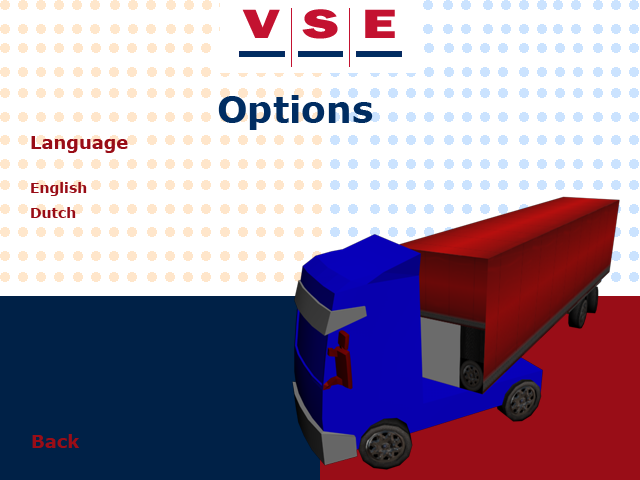
<style>
.page{position:relative;width:640px;height:480px;background:#ffffff}
.page>*{position:absolute;margin:0}
.t1{font:36px "Verdana-Bold";color:#002d62}
.t2{font:18px "Verdana-Bold";color:#990e17}
.t3{font:14px "Verdana-Bold";color:#990e17}
</style>
<div class="page">
<p class="t1" style="left:218px;top:95px;width:155px;height:35px">Options</p>
<p class="t2" style="left:31px;top:136px;width:97px;height:17px">Language</p>
<p class="t3" style="left:31px;top:182px;width:56px;height:14px">English</p>
<p class="t3" style="left:31px;top:207px;width:45px;height:11px">Dutch</p>
<p class="t2" style="left:32px;top:434px;width:48px;height:14px">Back</p>
</div>
